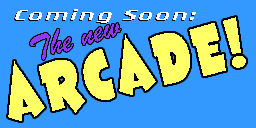
<style>
.page{position:relative;width:256px;height:128px;background:#3399ff}
.page>*{position:absolute;margin:0}
.t1{font:66.2px "CCThatsAllFolks-Bold";letter-spacing:0.08em;color:#ffff66;scale:0.72 1}
.t2{font:14.9px "RogueSansExt-LightIt";letter-spacing:0.1em;color:#ffffff;scale:1.71 1}
.t3{font:36px "BrushScriptMT";letter-spacing:-0.01em;color:#8f37ff}
</style>
<div class="page">
<p class="t1" style="left:8px;top:17px;width:238px;height:104px;rotate:-13deg">aRCaDE!</p>
<p class="t2" style="left:15px;top:9px;width:181px;height:14px">Coming Soon:</p>
<p class="t3" style="left:30px;top:23px;width:91px;height:37px;rotate:-17deg">The new</p>
</div>
